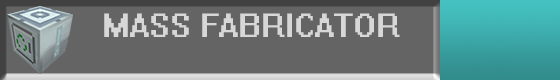
<style>
.page{position:relative;width:560px;height:80px;background:#646464}
.page>*{position:absolute;margin:0}
.t1{font:30px "System";color:#d7d7d7}
</style>
<div class="page">
<p class="t1" style="left:104px;top:13px;width:296px;height:24px">MASS FABRICATOR</p>
</div>
